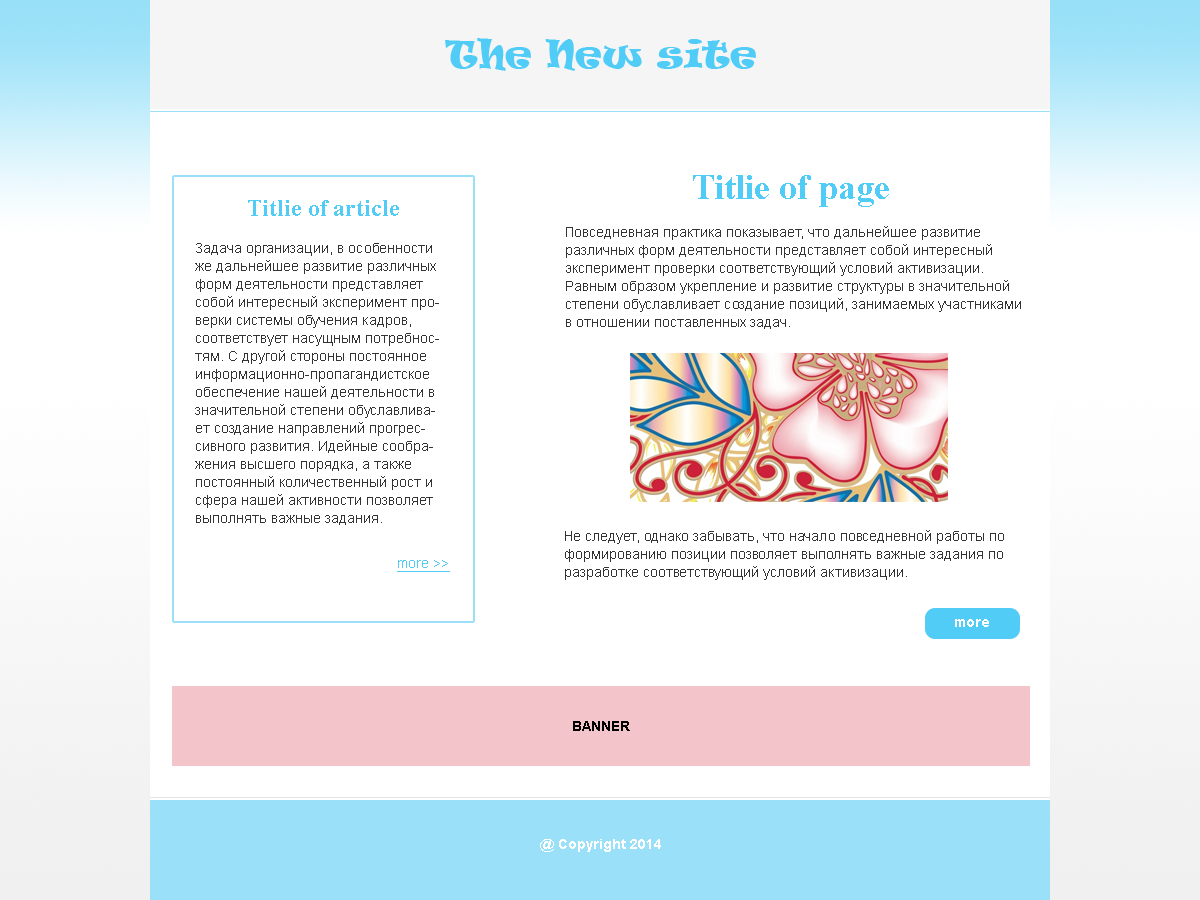
<style>
.page{position:relative;width:1200px;height:900px;background:#ffffff}
.page>*{position:absolute;margin:0}
.t1{font:36px "TimesNewRomanPS-BoldMT";color:#51ccf6}
.t2{font:24px "TimesNewRomanPS-BoldMT";color:#51ccf6}
.t3{font:14px/18px "ArialMT";color:#333333}
.t4{font:14px "ArialMT";color:#51ccf6;text-decoration:underline}
.t5{font:14px "Arial-BoldMT";color:#ffffff}
</style>
<div class="page">
<p class="t1" style="left:693px;top:175px;width:196px;height:32px">Titlie of page</p>
<p class="t2" style="left:248px;top:200px;width:151px;height:16px">Titlie of article</p>
<p class="t3" style="left:566px;top:226px;width:455px;height:103px">Повседневная практика показывает, что дальнейшее развитие <br>различных форм деятельности представляет собой интересный <br>эксперимент проверки соответствующий условий активизации. <br>Равным образом укрепление и развитие структуры в значительной <br>степени обуславливает создание позиций, занимаемых участниками <br>в отношении поставленных задач.</p>
<p class="t3" style="left:195px;top:243px;width:244px;height:282px">Задача организации, в особенности же дальнейшее развитие различных форм деятельности представляет собой интересный эксперимент проверки системы обучения кадров, соответствует насущным потребностям. С другой стороны постоянное информационно-пропагандистское обеспечение нашей деятельности в значительной степени обуславливает создание направлений прогрессивного развития. Идейные соображения высшего порядка, а также постоянный количественный рост и сфера нашей активности позволяет выполнять важные задания.</p>
<p class="t3" style="left:565px;top:530px;width:439px;height:50px">Не следует, однако забывать, что начало повседневной работы по <br>формированию позиции позволяет выполнять важные задания по <br>разработке соответствующий условий активизации.</p>
<p class="t4" style="left:397px;top:560px;width:53px;height:12px">more &gt;&gt;</p>
<p class="t5" style="left:955px;top:619px;width:34px;height:8px">more</p>
<p class="t5" style="left:540px;top:839px;width:121px;height:13px">@ Copyright 2014</p>
</div>
